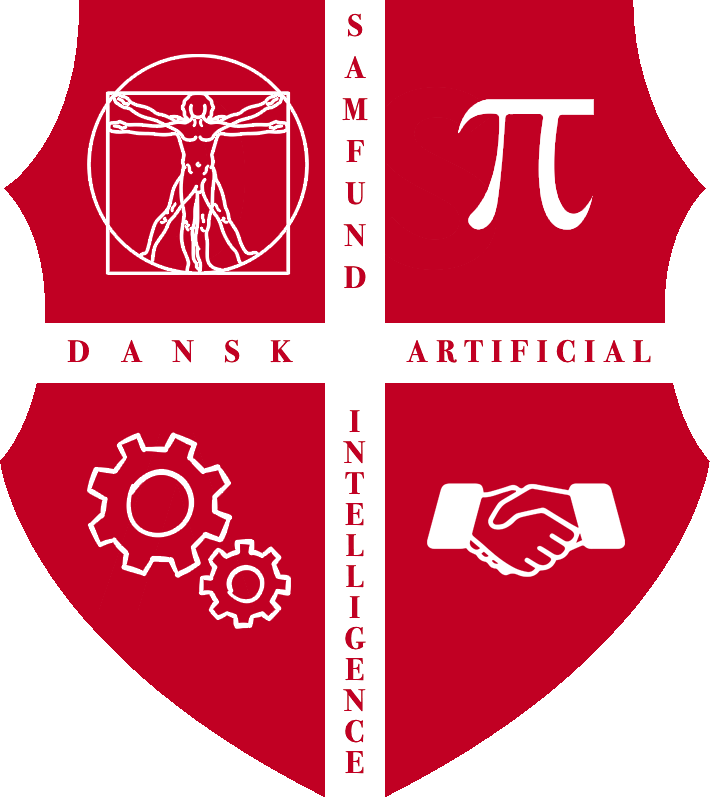
<style>
.page{position:relative;width:710px;height:812px;background:#c10023}
.page>*{position:absolute;margin:0}
.t1{font:31px/42px "BodoniSvtyTwoITCTT-Bold";color:#c10023}
.t2{font:31px "BodoniSvtyTwoITCTT-Bold";letter-spacing:1em;color:#c10023}
.t3{font:31px "BodoniSvtyTwoITCTT-Bold";letter-spacing:0.28em;color:#c10023}
.t4{font:31px/31px "BodoniSvtyTwoITCTT-Bold";letter-spacing:0.2em;color:#c10023}
</style>
<div class="page">
<p class="t1" style="left:342px;top:13px;width:26px;height:276px;text-align:center">S<br>A<br>M<br>F<br>U<br>N<br>D</p>
<p class="t2" style="left:67px;top:339px;width:226px;height:24px">DANSK</p>
<p class="t3" style="left:406px;top:339px;width:245px;height:24px">ARTIFICIAL</p>
<p class="t4" style="left:343px;top:410px;width:23px;height:364px;text-align:center">I<br>N<br>T<br>E<br>L<br>L<br>I<br>G<br>E<br>N<br>C<br>E</p>
</div>
